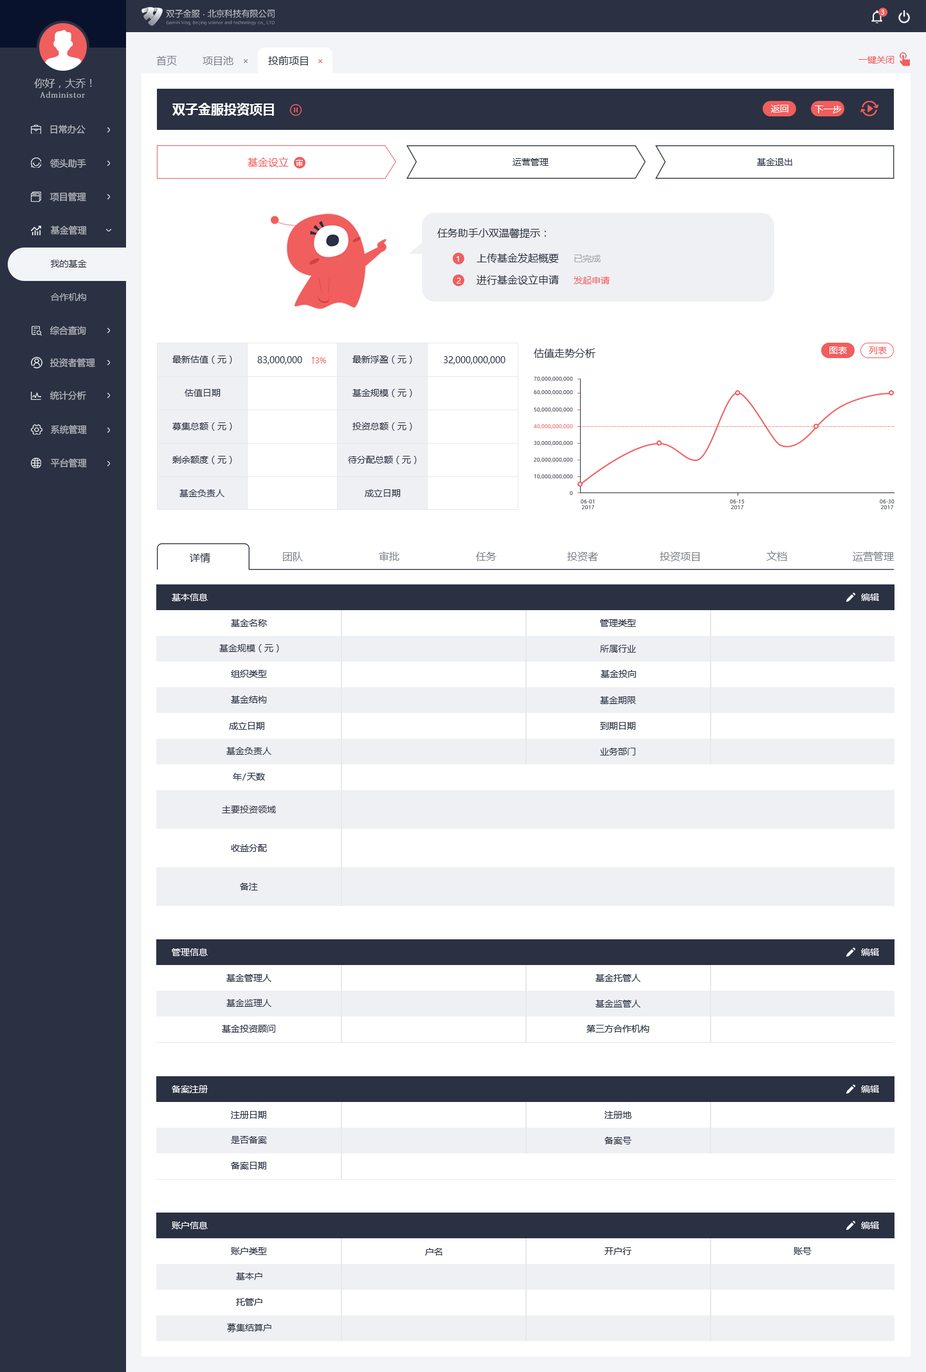
<style>
.page{position:relative;width:926px;height:1372px;background:#ffffff}
.page>*{position:absolute;margin:0}
.t1{font:6.4px "MicrosoftYaHeiUI";color:#ffffff}
.t2{font:10.3px "MicrosoftYaHeiMono";color:#7b7f88}
.t3{font:10.3px "MicrosoftYaHeiMono";color:#2a3142}
.t4{font:9px "MicrosoftYaHeiMono";color:#f05e5e}
.t5{font:10.3px "MicrosoftYaHeiMono";color:#b4b7bd}
.t6{font:7.7px "AdobeFangsongStd-Regular";letter-spacing:0.1em;color:#b4b7bd}
.t7{font:12.9px "MicrosoftYaHeiUI-Bold";color:#ffffff}
.t8{font:9px "MicrosoftYaHeiUI";color:#ffffff}
.t9{font:9px "MicrosoftYaHeiUI";color:#b4b7bd}
.t10{font:10.3px "MicrosoftYaHeiUI";color:#f05e5e}
.t11{font:7.7px "MicrosoftYaHeiUI";color:#ffffff}
.t12{font:9px "MicrosoftYaHeiUI";color:#2a3142}
.t13{font:10.3px "MicrosoftYaHeiUI";color:#2a3142}
.t14{font:9px "MicrosoftYaHeiUI";color:#a0a3aa}
.t15{font:9px "MicrosoftYaHeiUI";color:#f05e5e}
.t16{font:7.7px "MicrosoftYaHeiUI";color:#f05e5e}
.t17{font:5.1px "MicrosoftYaHeiUI"}
.t18{font:5.1px "MicrosoftYaHeiUI";color:#2a3142}
.t19{font:10.3px "MicrosoftYaHeiUI";color:#7b7f88}
.t20{font:9px "MicrosoftYaHeiMono";color:#ffffff}
.t21{font:9px "MicrosoftYaHeiMono";color:#2a3142}
</style>
<div class="page">
<p class="t1" style="left:881px;top:10px;width:3px;height:5px">3</p>
<p class="t2" style="left:156px;top:56px;width:21px;height:10px">首页</p>
<p class="t2" style="left:203px;top:56px;width:30px;height:10px">项目池</p>
<p class="t3" style="left:268px;top:56px;width:40px;height:10px">投前项目</p>
<p class="t4" style="left:858px;top:56px;width:36px;height:8px">一键关闭</p>
<p class="t5" style="left:34px;top:78px;width:58px;height:10px">你好，大乔！</p>
<p class="t6" style="left:40px;top:91px;width:45px;height:7px">Administor</p>
<p class="t7" style="left:172px;top:103px;width:102px;height:13px">双子金服投资项目</p>
<p class="t8" style="left:771px;top:105px;width:17px;height:8px">返回</p>
<p class="t8" style="left:815px;top:105px;width:27px;height:8px">下一步</p>
<p class="t9" style="left:50px;top:125px;width:36px;height:9px">日常办公</p>
<p class="t9" style="left:50px;top:159px;width:36px;height:9px">领头助手</p>
<p class="t10" style="left:248px;top:157px;width:41px;height:10px">基金设立</p>
<p class="t11" style="left:296px;top:159px;width:7px;height:7px">审</p>
<p class="t12" style="left:512px;top:158px;width:36px;height:8px">运营管理</p>
<p class="t12" style="left:757px;top:158px;width:35px;height:8px">基金退出</p>
<p class="t9" style="left:50px;top:192px;width:36px;height:10px">项目管理</p>
<p class="t9" style="left:50px;top:226px;width:37px;height:9px">基金管理</p>
<p class="t13" style="left:437px;top:228px;width:109px;height:10px">任务助手小双温馨提示：</p>
<p class="t11" style="left:456px;top:256px;width:3px;height:6px">1</p>
<p class="t13" style="left:476px;top:253px;width:83px;height:10px">上传基金发起概要</p>
<p class="t14" style="left:574px;top:255px;width:26px;height:7px">已完成</p>
<p class="t12" style="left:50px;top:260px;width:37px;height:7px">我的基金</p>
<p class="t11" style="left:456px;top:278px;width:5px;height:6px">2</p>
<p class="t13" style="left:476px;top:274px;width:83px;height:11px">进行基金设立申请</p>
<p class="t15" style="left:573px;top:276px;width:36px;height:8px">发起申请</p>
<p class="t9" style="left:51px;top:293px;width:35px;height:8px">合作机构</p>
<p class="t9" style="left:50px;top:326px;width:36px;height:10px">综合查询</p>
<p class="t13" style="left:534px;top:348px;width:61px;height:10px">估值走势分析</p>
<p class="t8" style="left:829px;top:346px;width:18px;height:8px">图表</p>
<p class="t15" style="left:869px;top:346px;width:18px;height:8px">列表</p>
<p class="t9" style="left:50px;top:358px;width:45px;height:9px">投资者管理</p>
<p class="t12" style="left:172px;top:356px;width:60px;height:8px">最新估值（元）</p>
<p class="t12" style="left:257px;top:356px;width:45px;height:8px">83,000,000</p>
<p class="t16" style="left:311px;top:357px;width:16px;height:7px">↑3%</p>
<p class="t12" style="left:352px;top:356px;width:60px;height:8px">最新浮盈（元）</p>
<p class="t12" style="left:444px;top:356px;width:61px;height:8px">32,000,000,000</p>
<p class="t17" style="left:534px;top:376px;width:39px;height:6px">70,000,000,000</p>
<p class="t12" style="left:184px;top:389px;width:37px;height:8px">估值日期</p>
<p class="t12" style="left:352px;top:389px;width:60px;height:8px">基金规模（元）</p>
<p class="t17" style="left:534px;top:390px;width:39px;height:5px">60,000,000,000</p>
<p class="t9" style="left:50px;top:391px;width:36px;height:9px">统计分析</p>
<p class="t17" style="left:534px;top:407px;width:39px;height:6px">50,000,000,000</p>
<p class="t9" style="left:50px;top:425px;width:37px;height:9px">系统管理</p>
<p class="t12" style="left:172px;top:422px;width:60px;height:9px">募集总额（元）</p>
<p class="t12" style="left:352px;top:422px;width:60px;height:9px">投资总额（元）</p>
<p class="t17" style="left:534px;top:424px;width:39px;height:5px">40,000,000,000</p>
<p class="t17" style="left:534px;top:440px;width:39px;height:6px">30,000,000,000</p>
<p class="t9" style="left:50px;top:458px;width:37px;height:9px">平台管理</p>
<p class="t12" style="left:172px;top:456px;width:60px;height:8px">剩余额度（元）</p>
<p class="t12" style="left:348px;top:456px;width:69px;height:8px">待分配总额（元）</p>
<p class="t17" style="left:534px;top:457px;width:39px;height:6px">20,000,000,000</p>
<p class="t18" style="left:534px;top:474px;width:39px;height:6px">10,000,000,000</p>
<p class="t12" style="left:179px;top:489px;width:45px;height:8px">基金负责人</p>
<p class="t12" style="left:364px;top:489px;width:37px;height:8px">成立日期</p>
<p class="t17" style="left:570px;top:491px;width:3px;height:4px">0</p>
<p class="t18" style="left:580px;top:499px;width:14px;height:10px;text-align:center">06-01<br>2017</p>
<p class="t18" style="left:730px;top:499px;width:14px;height:10px;text-align:center">06-15<br>2017</p>
<p class="t17" style="left:879px;top:499px;width:15px;height:10px;text-align:center">06-30<br>2017</p>
<p class="t13" style="left:190px;top:553px;width:20px;height:9px">详情</p>
<p class="t19" style="left:283px;top:552px;width:20px;height:9px">团队</p>
<p class="t19" style="left:379px;top:552px;width:20px;height:9px">审批</p>
<p class="t19" style="left:476px;top:552px;width:20px;height:9px">任务</p>
<p class="t19" style="left:567px;top:552px;width:31px;height:9px">投资者</p>
<p class="t19" style="left:660px;top:552px;width:39px;height:9px">投资项目</p>
<p class="t19" style="left:766px;top:551px;width:21px;height:10px">文档</p>
<p class="t19" style="left:852px;top:552px;width:42px;height:9px">运营管理</p>
<p class="t20" style="left:172px;top:593px;width:36px;height:8px">基本信息</p>
<p class="t20" style="left:861px;top:593px;width:18px;height:8px">编辑</p>
<p class="t21" style="left:231px;top:619px;width:36px;height:8px">基金名称</p>
<p class="t21" style="left:600px;top:619px;width:36px;height:8px">管理类型</p>
<p class="t21" style="left:219px;top:644px;width:60px;height:8px">基金规模（元）</p>
<p class="t21" style="left:600px;top:645px;width:36px;height:7px">所属行业</p>
<p class="t21" style="left:231px;top:670px;width:36px;height:8px">组织类型</p>
<p class="t21" style="left:600px;top:670px;width:36px;height:8px">基金投向</p>
<p class="t21" style="left:231px;top:696px;width:36px;height:7px">基金结构</p>
<p class="t21" style="left:600px;top:696px;width:36px;height:8px">基金期限</p>
<p class="t21" style="left:229px;top:722px;width:35px;height:8px">成立日期</p>
<p class="t21" style="left:600px;top:722px;width:35px;height:8px">到期日期</p>
<p class="t21" style="left:226px;top:747px;width:45px;height:8px">基金负责人</p>
<p class="t21" style="left:600px;top:748px;width:35px;height:7px">业务部门</p>
<p class="t21" style="left:233px;top:773px;width:32px;height:7px">年/天数</p>
<p class="t21" style="left:222px;top:806px;width:54px;height:7px">主要投资领域</p>
<p class="t21" style="left:231px;top:844px;width:36px;height:8px">收益分配</p>
<p class="t21" style="left:240px;top:883px;width:18px;height:7px">备注</p>
<p class="t20" style="left:172px;top:948px;width:36px;height:8px">管理信息</p>
<p class="t20" style="left:861px;top:948px;width:18px;height:8px">编辑</p>
<p class="t21" style="left:226px;top:974px;width:45px;height:8px">基金管理人</p>
<p class="t21" style="left:595px;top:974px;width:45px;height:8px">基金托管人</p>
<p class="t21" style="left:226px;top:999px;width:45px;height:8px">基金监理人</p>
<p class="t21" style="left:595px;top:1000px;width:45px;height:7px">基金监管人</p>
<p class="t21" style="left:222px;top:1025px;width:53px;height:7px">基金投资顾问</p>
<p class="t21" style="left:586px;top:1025px;width:63px;height:7px">第三方合作机构</p>
<p class="t20" style="left:172px;top:1085px;width:36px;height:8px">备案注册</p>
<p class="t20" style="left:861px;top:1085px;width:18px;height:8px">编辑</p>
<p class="t21" style="left:231px;top:1111px;width:35px;height:8px">注册日期</p>
<p class="t21" style="left:604px;top:1111px;width:27px;height:8px">注册地</p>
<p class="t21" style="left:231px;top:1136px;width:36px;height:8px">是否备案</p>
<p class="t21" style="left:604px;top:1137px;width:27px;height:7px">备案号</p>
<p class="t21" style="left:231px;top:1162px;width:35px;height:7px">备案日期</p>
<p class="t20" style="left:172px;top:1221px;width:36px;height:8px">账户信息</p>
<p class="t20" style="left:861px;top:1221px;width:18px;height:8px">编辑</p>
<p class="t21" style="left:231px;top:1247px;width:36px;height:8px">账户类型</p>
<p class="t21" style="left:425px;top:1248px;width:17px;height:8px">户名</p>
<p class="t21" style="left:604px;top:1247px;width:27px;height:8px">开户行</p>
<p class="t21" style="left:793px;top:1247px;width:18px;height:8px">账号</p>
<p class="t21" style="left:236px;top:1272px;width:26px;height:8px">基本户</p>
<p class="t21" style="left:236px;top:1298px;width:26px;height:8px">托管户</p>
<p class="t21" style="left:227px;top:1323px;width:44px;height:9px">募集结算户</p>
</div>
